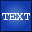
<style>
.page{position:relative;width:32px;height:32px;background:#1239ab}
.page>*{position:absolute;margin:0}
.t1{font:12px "Courier";color:#fdfeff}
</style>
<div class="page">
<p class="t1" style="left:2px;top:13px;width:28px;height:7px">TEXT</p>
</div>
